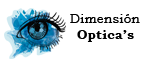
<style>
.page{position:relative;width:144px;height:65px;background:#ffffff}
.page>*{position:absolute;margin:0}
.t1{font:12.5px "BookmanOldStyle";letter-spacing:0.04em;color:#000000}
.t2{font:12.5px "BookmanOldStyle-Bold";letter-spacing:0.04em;color:#000000}
</style>
<div class="page">
<p class="t1" style="left:70px;top:14px;width:70px;height:9px">Dimensión</p>
<p class="t2" style="left:77px;top:30px;width:57px;height:12px">Optica’s</p>
</div>
